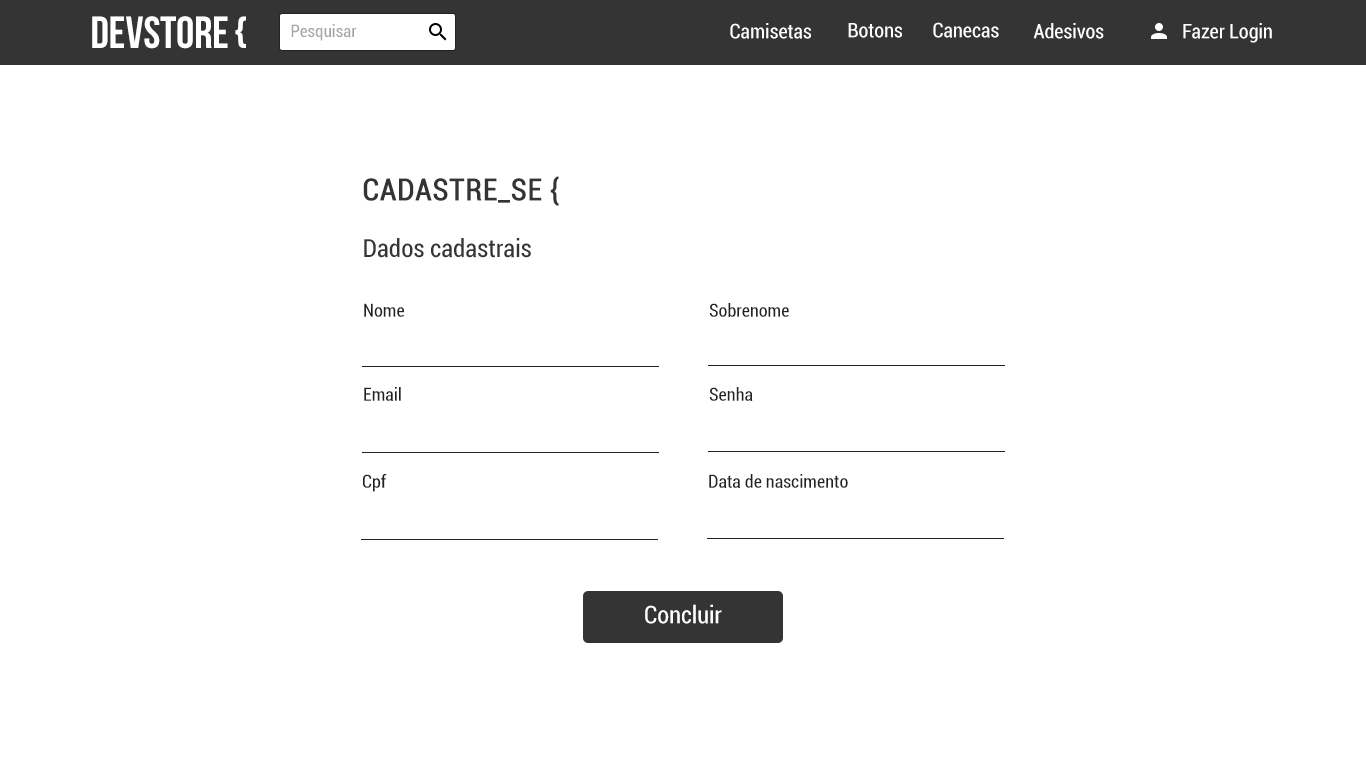
<style>
.page{position:relative;width:1366px;height:768px;background:#ffffff}
.page>*{position:absolute;margin:0}
.t1{font:45px "BebasNeue";color:#ffffff;text-transform:uppercase}
.t2{font:17px "Roboto-Condensed";color:#a6a6a6}
.t3{font:20px "Roboto-Condensed";color:#ffffff}
.t4{font:30px "Roboto-Condensed";color:#343434;font-weight:bold}
.t5{font:25px "Roboto-Condensed";color:#343434}
.t6{font:18px "Roboto-Condensed";color:#222222}
.t7{font:24px "Roboto-Condensed";color:#ffffff}
</style>
<div class="page">
<p class="t1" style="left:92px;top:16px;width:154px;height:33px">DEVSTORE {</p>
<p class="t2" style="left:291px;top:24px;width:66px;height:17px">Pesquisar</p>
<p class="t3" style="left:730px;top:23px;width:81px;height:16px">Camisetas</p>
<p class="t3" style="left:848px;top:23px;width:54px;height:15px">Botons</p>
<p class="t3" style="left:933px;top:22px;width:66px;height:16px">Canecas</p>
<p class="t3" style="left:1033px;top:23px;width:71px;height:16px">Adesivos</p>
<p class="t3" style="left:1183px;top:23px;width:89px;height:20px">Fazer Login</p>
<p class="t4" style="left:363px;top:176px;width:196px;height:30px">CADASTRE_SE {</p>
<p class="t5" style="left:364px;top:238px;width:167px;height:20px">Dados cadastrais</p>
<p class="t6" style="left:364px;top:303px;width:40px;height:14px">Nome</p>
<p class="t6" style="left:709px;top:303px;width:80px;height:14px">Sobrenome</p>
<p class="t6" style="left:364px;top:387px;width:37px;height:14px">Email</p>
<p class="t6" style="left:709px;top:387px;width:44px;height:14px">Senha</p>
<p class="t6" style="left:363px;top:474px;width:24px;height:18px">Cpf</p>
<p class="t6" style="left:709px;top:474px;width:139px;height:14px">Data de nascimento</p>
<p class="t7" style="left:645px;top:604px;width:77px;height:20px">Concluir</p>
</div>
